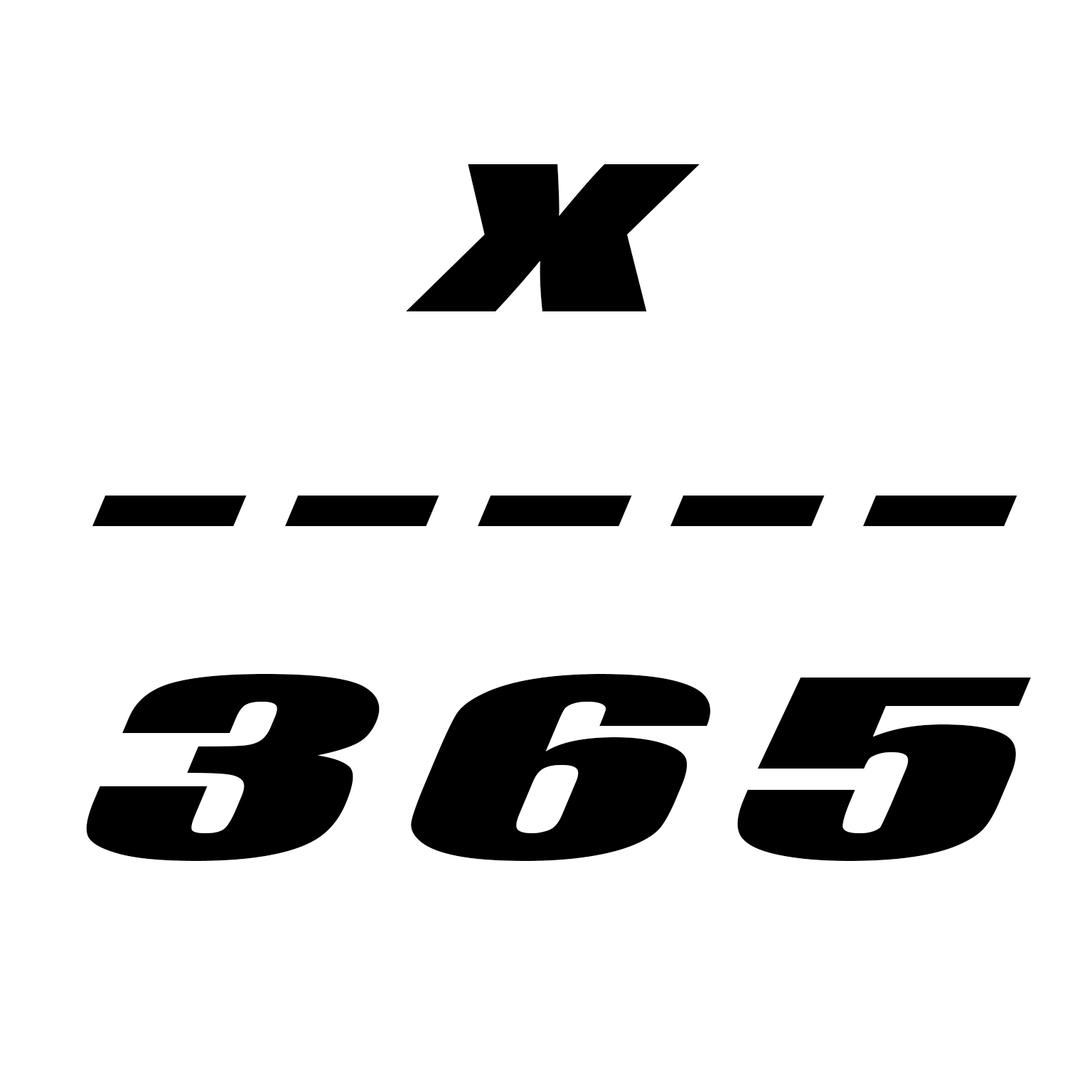
<style>
.page{position:relative;width:1092px;height:1092px;background:#ffffff}
.page>*{position:absolute;margin:0}
.t1{font:227.5px "Impact";letter-spacing:0.06em;color:#000000;font-style:italic;scale:2.39 1}
.t2{font:106.6px "Impact";letter-spacing:0.06em;color:#000000;font-style:italic;scale:2.39 1}
</style>
<div class="page">
<p class="t1" style="left:86px;top:164px;width:945px;height:697px;text-align:center"><span class="t2"><br></span>x<br>-----<br>365</p>
</div>
